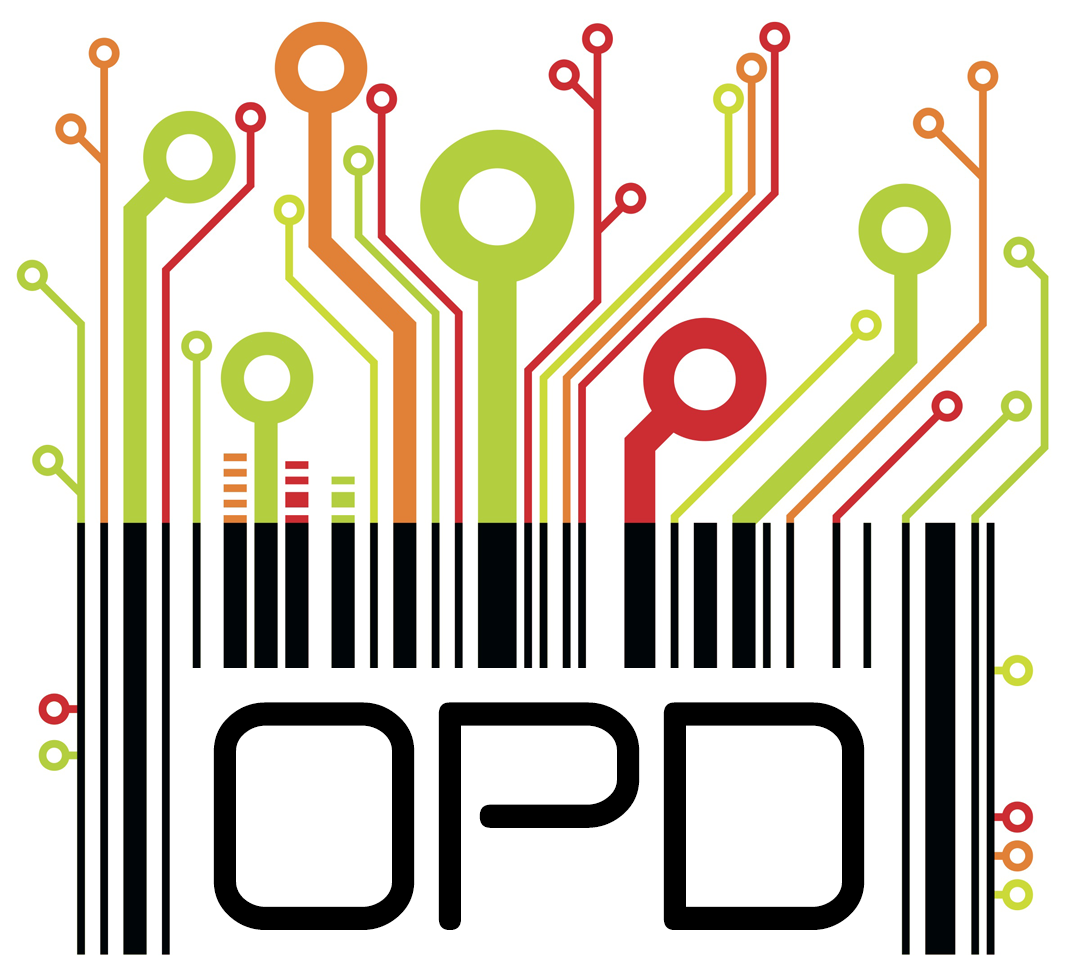
<style>
.page{position:relative;width:1080px;height:978px;background:#ffffff}
.page>*{position:absolute;margin:0}
.t1{font:401px "NPNaipolAllinOne-Bold";letter-spacing:-0.025em;color:#000000;scale:0.91 1}
</style>
<div class="page">
<p class="t1" style="left:213px;top:702px;width:652px;height:228px">OPD</p>
</div>
